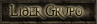
<style>
.page{position:relative;width:97px;height:24px}
.page>*{position:absolute;margin:0}
.t1{font:14.7px "Morpheus"}
</style>
<div class="page">
<p class="t1" style="left:10px;top:5px;width:73px;height:13px">Lider Grupo</p>
</div>
